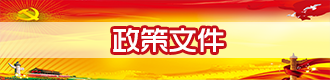
<style>
.page{position:relative;width:330px;height:80px}
.page>*{position:absolute;margin:0}
.t1{font:28.2px "ShiShangZhongHei";color:#ffffff}
</style>
<div class="page">
<p class="t1" style="left:113px;top:28px;width:111px;height:24px">政策文件</p>
</div>
